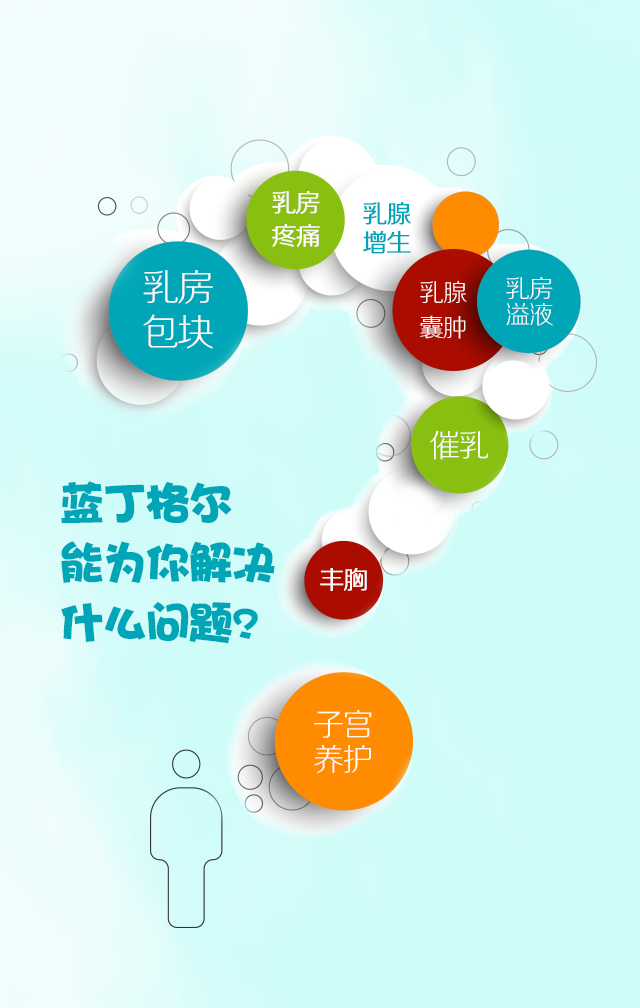
<style>
.page{position:relative;width:640px;height:1008px;background:#cefcf9}
.page>*{position:absolute;margin:0}
.t1{font:25px/32.7px "FZZXHJW--GB1-0";letter-spacing:-0.06em;color:#fcf9f9;font-weight:bold}
.t2{font:25px/28.5px "FZZXHJW--GB1-0";letter-spacing:-0.06em;color:#00a6b7;font-weight:bold}
.t3{font:37.5px/45.2px "FZZXHJW--GB1-0";letter-spacing:-0.06em;color:#fcf9f9}
.t4{font:25px/34.8px "FZZXHJW--GB1-0";letter-spacing:-0.06em;color:#fcf9f9}
.t5{font:25px/26.5px "FZZXHJW--GB1-0";letter-spacing:-0.06em;color:#fcf9f9}
.t6{font:31.2px "FZZXHJW--GB1-0";letter-spacing:-0.06em;color:#fcf9f9}
.t7{font:45.8px/59.8px "DFPHaiBaoW12";letter-spacing:-0.06em;color:#00a6b7}
.t8{font:25px "FZZXHJW--GB1-0";letter-spacing:-0.06em;color:#fcf9f9;font-weight:bold}
.t9{font:31.2px/34.8px "FZZXHJW--GB1-0";letter-spacing:-0.06em;color:#fcf9f9}
</style>
<div class="page">
<p class="t1" style="left:272px;top:191px;width:48px;height:56px">乳房<br>疼痛</p>
<p class="t2" style="left:363px;top:202px;width:48px;height:52px">乳腺<br>增生</p>
<p class="t3" style="left:143px;top:270px;width:70px;height:79px">乳房<br>包块</p>
<p class="t4" style="left:420px;top:281px;width:47px;height:58px">乳腺<br>囊肿</p>
<p class="t5" style="left:506px;top:277px;width:47px;height:49px">乳房<br>溢液</p>
<p class="t6" style="left:430px;top:431px;width:58px;height:29px">催乳</p>
<p class="t7" style="left:61px;top:481px;width:214px;height:163px">蓝丁格尔<br>能为你解决<br>什么问题?</p>
<p class="t8" style="left:320px;top:568px;width:47px;height:23px">丰胸</p>
<p class="t9" style="left:314px;top:710px;width:58px;height:64px">子宫<br>养护</p>
</div>
